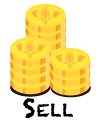
<style>
.page{position:relative;width:100px;height:120px;background:#ffffff}
.page>*{position:absolute;margin:0}
.t1{font:24px "Chalkduster";letter-spacing:0.05em;color:#000000;font-variant:small-caps;font-weight:bold}
</style>
<div class="page">
<p class="t1" style="left:23px;top:98px;width:50px;height:21px">Sell</p>
</div>
